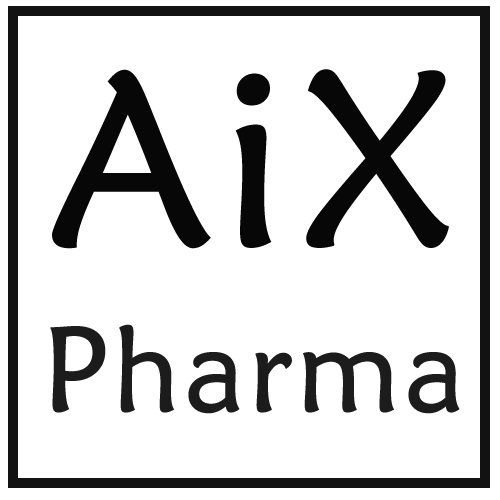
<style>
.page{position:relative;width:500px;height:500px;background:#ffffff}
.page>*{position:absolute;margin:0}
.t1{font:250px "MaiandraGD-Regular";letter-spacing:0.01em;color:#070707;font-weight:bold}
.t2{font:120.8px "MaiandraGD-Regular";letter-spacing:0.01em;color:#1c1c1c;font-weight:bold}
</style>
<div class="page">
<p class="t1" style="left:52px;top:69px;width:397px;height:180px">AiX</p>
<p class="t2" style="left:50px;top:324px;width:410px;height:90px">Pharma</p>
</div>
